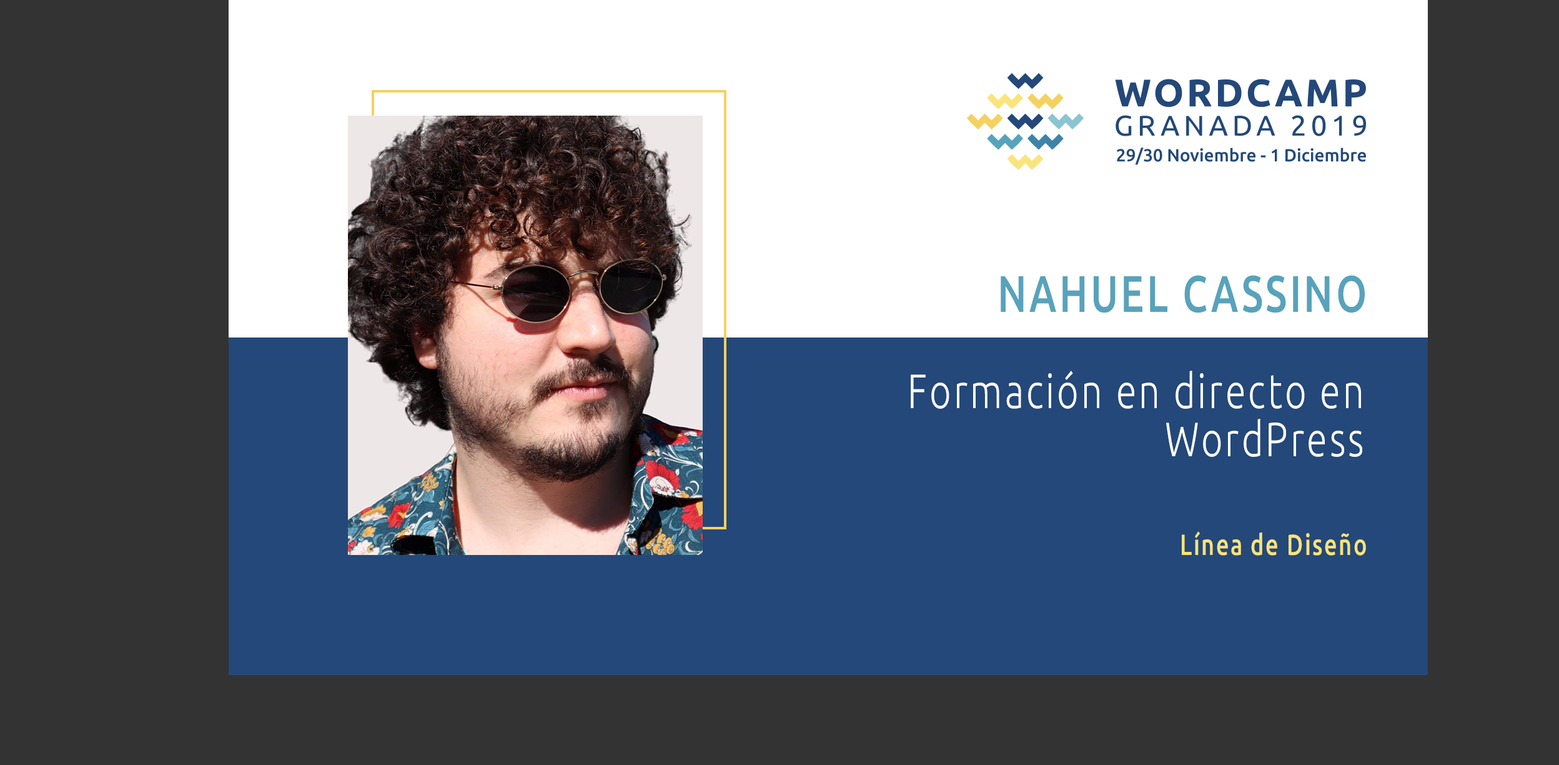
<style>
.page{position:relative;width:1559px;height:765px;background:#333333}
.page>*{position:absolute;margin:0}
.t1{font:51.4px "Ubuntu-Medium";letter-spacing:0.068em;color:#57a3bb;text-transform:uppercase;scale:0.77 1}
.t2{font:48.2px/48.2px "Ubuntu-Light";letter-spacing:0.068em;color:#ffffff;scale:0.77 1}
.t3{font:29.2px "Ubuntu-Medium";letter-spacing:0.068em;color:#f9e37b;scale:0.77 1}
</style>
<div class="page">
<p class="t1" style="left:1001px;top:275px;width:364px;height:38px">Nahuel Cassino</p>
<p class="t2" style="left:911px;top:370px;width:452px;height:87px;text-align:right">Formación en directo en WordPress</p>
<p class="t3" style="left:1182px;top:531px;width:184px;height:24px">Línea de Diseño</p>
</div>
